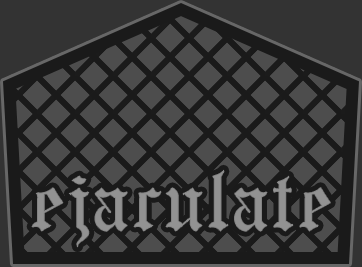
<style>
.page{position:relative;width:362px;height:267px;background:#1a1a1a}
.page>*{position:absolute;margin:0}
.t1{font:80px "Baxter";color:#929292}
</style>
<div class="page">
<p class="t1" style="left:32px;top:170px;width:298px;height:77px">ejaculate</p>
</div>
